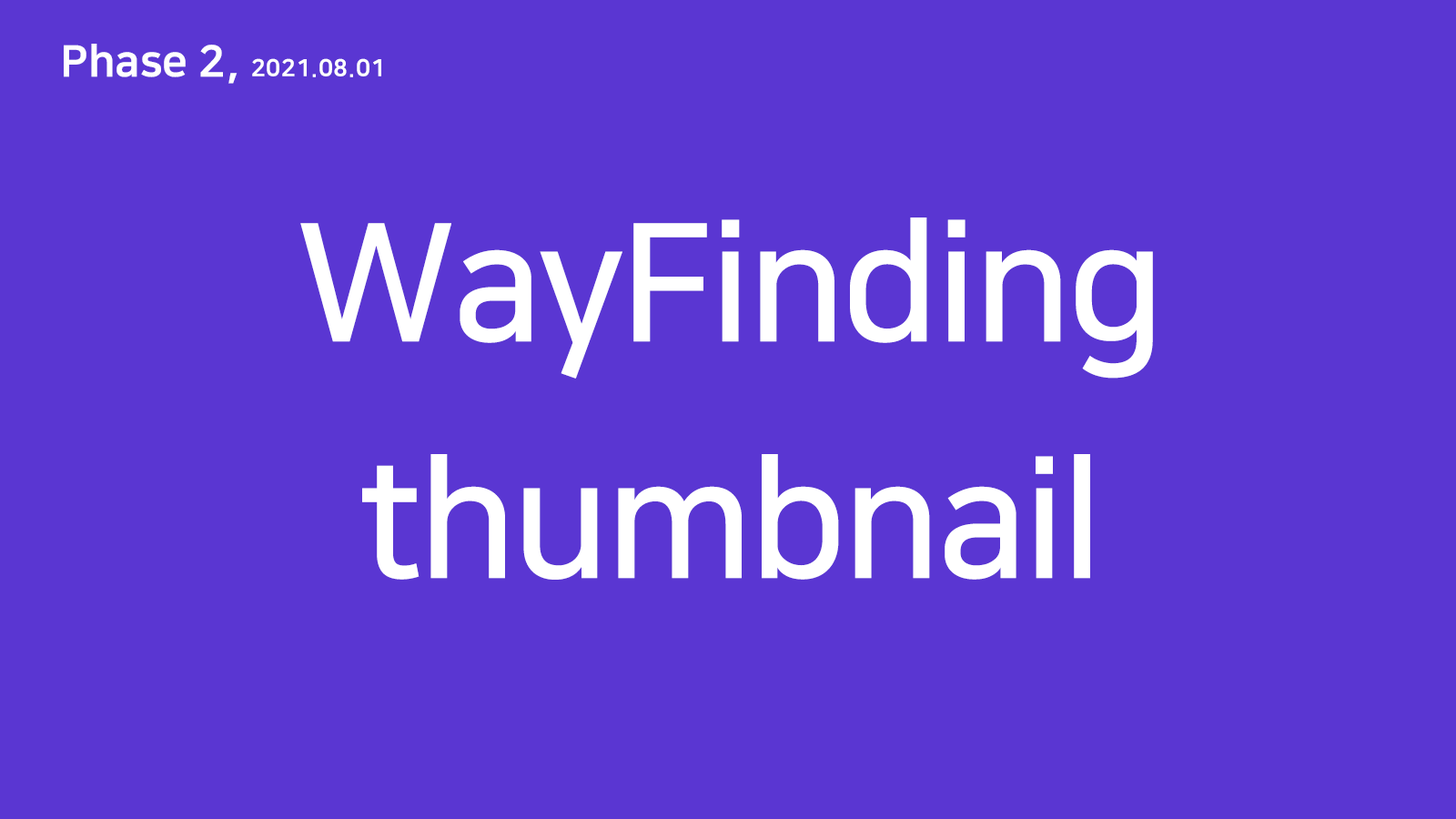
<style>
.page{position:relative;width:1456px;height:819px;background:#5a36d2}
.page>*{position:absolute;margin:0}
.t1{font:23.7px "NanumSquareOTFEB";color:#ffffff}
.t2{font:43.7px "NanumSquareOTFEB";color:#ffffff}
.t3{font:163.6px/236.6px "NanumSquareOTFB";letter-spacing:-0.025em;color:#ffffff}
</style>
<div class="page">
<p class="t1" style="left:64px;top:44px;width:317px;height:40px"><span class="t2">Phase 2, </span>2021.08.01</p>
<p class="t3" style="left:300px;top:217px;width:853px;height:363px;text-align:center">WayFinding<br>thumbnail</p>
</div>
